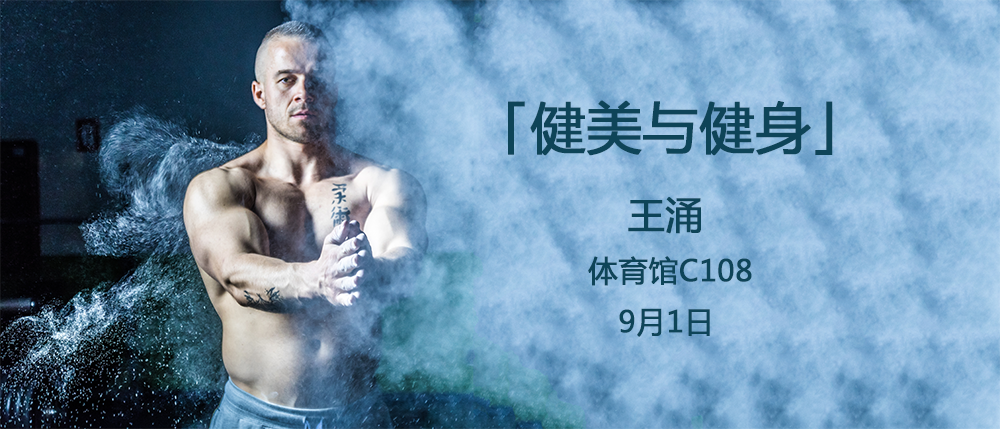
<style>
.page{position:relative;width:1000px;height:429px}
.page>*{position:absolute;margin:0}
.t1{font:54.9px "MicrosoftYaHei";color:#0e4458;font-weight:bold}
.t2{font:37.6px "MicrosoftYaHei";color:#0e4458;font-weight:bold}
.t3{font:29.4px "MicrosoftYaHei";color:#0e4458;font-weight:bold}
</style>
<div class="page">
<p class="t1" style="left:508px;top:100px;width:325px;height:56px">「健美与健身」</p>
<p class="t2" style="left:628px;top:197px;width:73px;height:37px">王涌</p>
<p class="t3" style="left:588px;top:256px;width:164px;height:30px">体育馆C108</p>
<p class="t3" style="left:619px;top:308px;width:91px;height:29px">9月1日</p>
</div>
